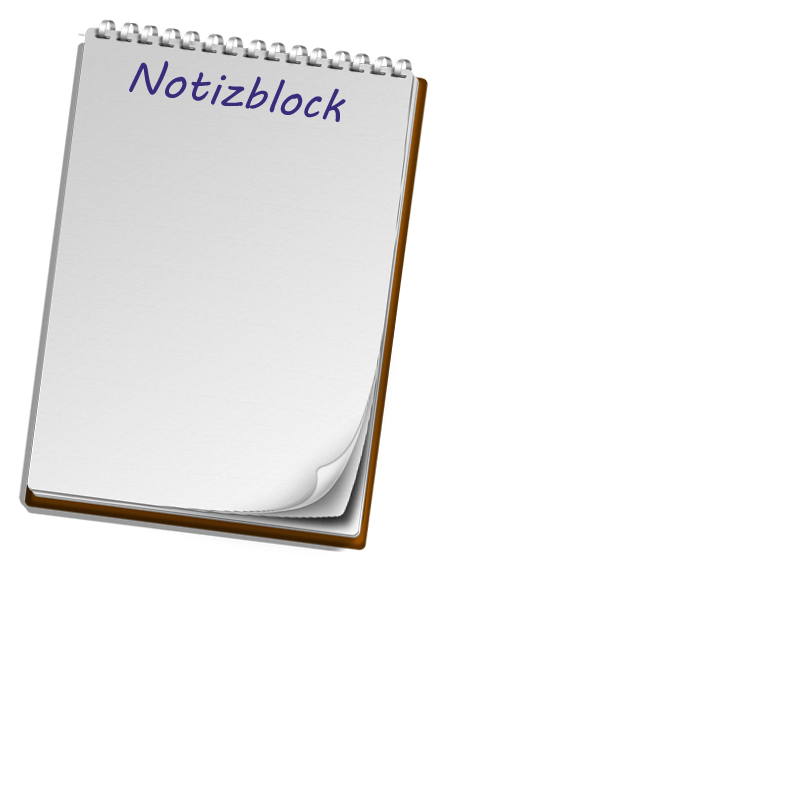
<style>
.page{position:relative;width:800px;height:797px;background:#ffffff}
.page>*{position:absolute;margin:0}
.t1{font:45px "MVBoli";color:#392c7a}
</style>
<div class="page">
<p class="t1" style="left:129px;top:61px;width:217px;height:61px;rotate:8deg">Notizblock</p>
</div>
